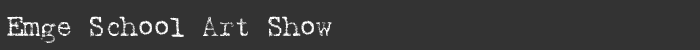
<style>
.page{position:relative;width:700px;height:50px;background:#333333}
.page>*{position:absolute;margin:0}
.t1{font:28px "Harting-Plain";letter-spacing:-0.025em;color:#ffffff}
</style>
<div class="page">
<p class="t1" style="left:7px;top:16px;width:325px;height:27px">Emge School Art Show</p>
</div>
